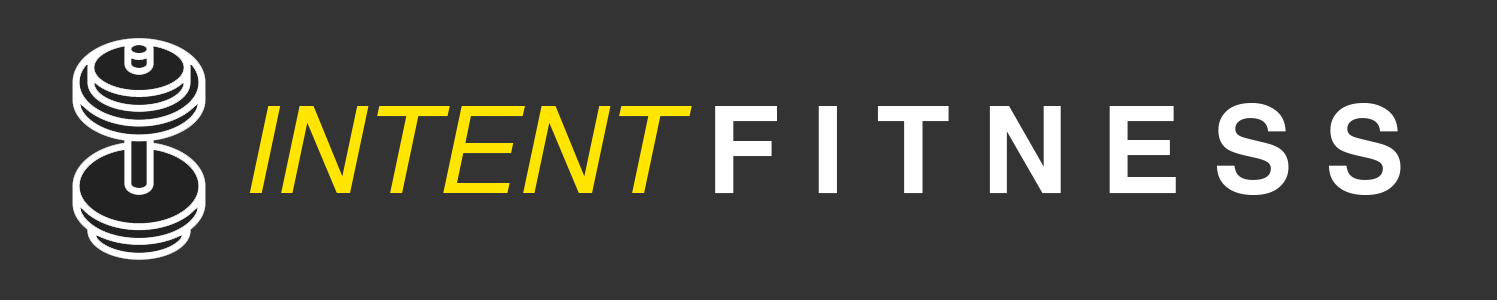
<style>
.page{position:relative;width:1497px;height:300px;background:#333333}
.page>*{position:absolute;margin:0}
.t1{font:120.8px "Helvetica-Bold";letter-spacing:0.26em;color:#ffffff}
.t2{font:120.8px "Helvetica-Oblique";color:#ffe500}
</style>
<div class="page">
<p class="t1" style="left:249px;top:103px;width:1152px;height:92px"><span class="t2">INTENT </span>FITNESS</p>
</div>
